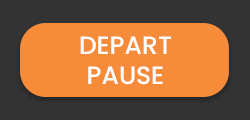
<style>
.page{position:relative;width:250px;height:120px;background:#f68c3a}
.page>*{position:absolute;margin:0}
.t1{font:25px "Poppins-Medium";color:#ffffff}
</style>
<div class="page">
<p class="t1" style="left:80px;top:36px;width:91px;height:49px;text-align:center">DEPART<br>PAUSE</p>
</div>
